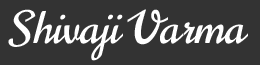
<style>
.page{position:relative;width:260px;height:65px;background:#333333}
.page>*{position:absolute;margin:0}
.t1{font:45px "Norican-Regular";color:#ffffff}
</style>
<div class="page">
<p class="t1" style="left:8px;top:9px;width:240px;height:52px">Shivaji Varma</p>
</div>
